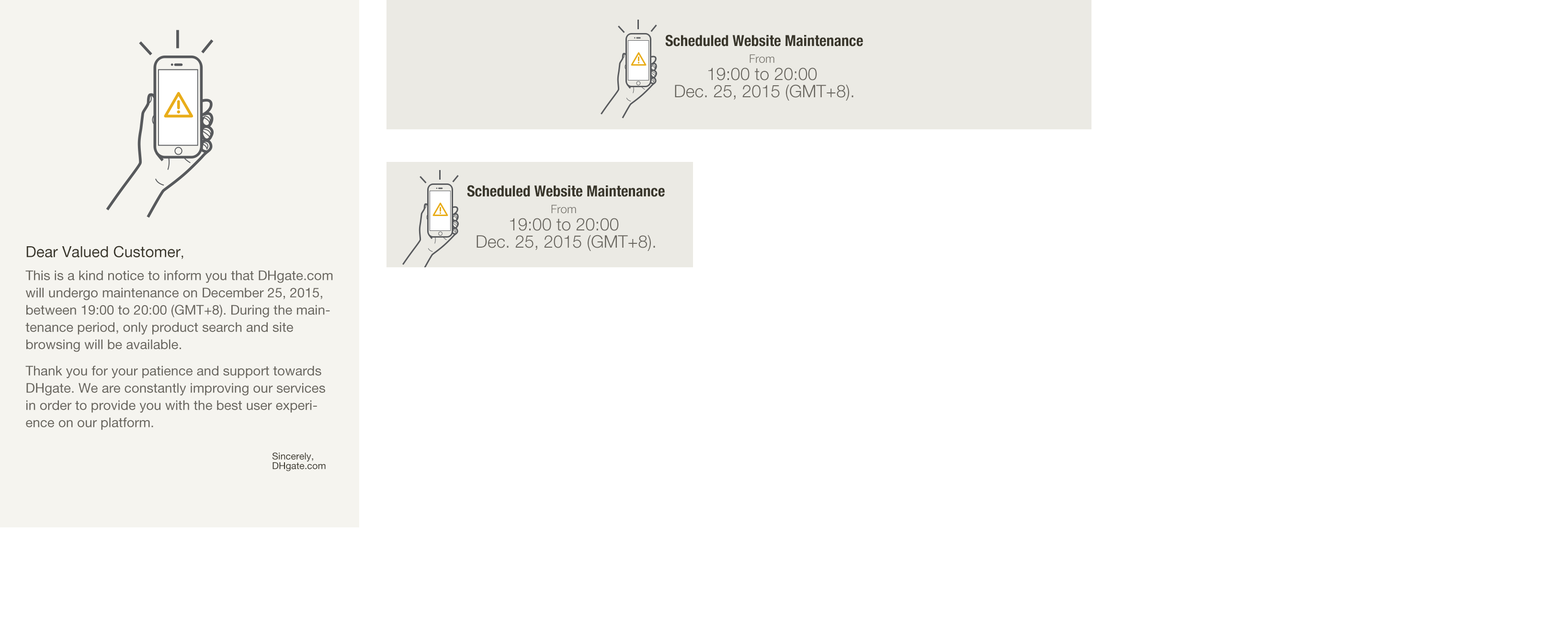
<style>
.page{position:relative;width:1568px;height:639px;background:#ffffff}
.page>*{position:absolute;margin:0}
.t1{font:15.3px "HelveticaNeueLTPro-BdCn";color:#39362b}
.t2{font:17.2px/17.2px "HelveticaNeueLTPro-Lt";color:#68655e}
.t3{font:11.5px/17.2px "HelveticaNeueLTPro-Lt";color:#68655e}
.t4{font:13.4px/17.2px "HelveticaNeueLTPro-Roman";color:#68655e}
.t5{font:15.3px/17.2px "HelveticaNeueLTPro-Roman";color:#39362b}
.t6{font:13.4px/17.2px "HelveticaNeueLTPro-Roman";color:#39362b}
.t7{font:13.4px/23px "HelveticaNeueLTPro-Roman";color:#68655e}
.t8{font:13.4px/26.3px "HelveticaNeueLTPro-Roman";color:#68655e}
.t9{font:9.6px/9.6px "HelveticaNeueLTPro-Roman";color:#39362b}
</style>
<div class="page">
<p class="t1" style="left:665px;top:34px;width:198px;height:12px">Scheduled Website Maintenance</p>
<p class="t2" style="left:675px;top:54px;width:178px;height:47px;text-align:center"><span class="t3">From</span> <br>19:00 to 20:00 <br>Dec. 25, 2015 (GMT+8).</p>
<p class="t1" style="left:467px;top:185px;width:198px;height:12px">Scheduled Website Maintenance</p>
<p class="t2" style="left:477px;top:205px;width:178px;height:46px;text-align:center"><span class="t3">From</span> <br>19:00 to 20:00 <br>Dec. 25, 2015 (GMT+8).</p>
<p class="t4" style="left:25px;top:246px;width:308px;height:184px"><span class="t5">Dear Valued Customer</span><span class="t6">,<br></span><span class="t7">This is a kind notice to inform you that DHgate.com </span>will undergo maintenance on December 25, 2015, between 19:00 to 20:00 (GMT+8). During the maintenance period, only product search and site browsing will be available.<br><span class="t8">Thank you for your patience and support towards </span>DHgate. We are constantly improving our services in order to provide you with the best user experience on our platform.</p>
<p class="t9" style="left:272px;top:452px;width:54px;height:19px">Sincerely,<br>DHgate.com</p>
</div>
